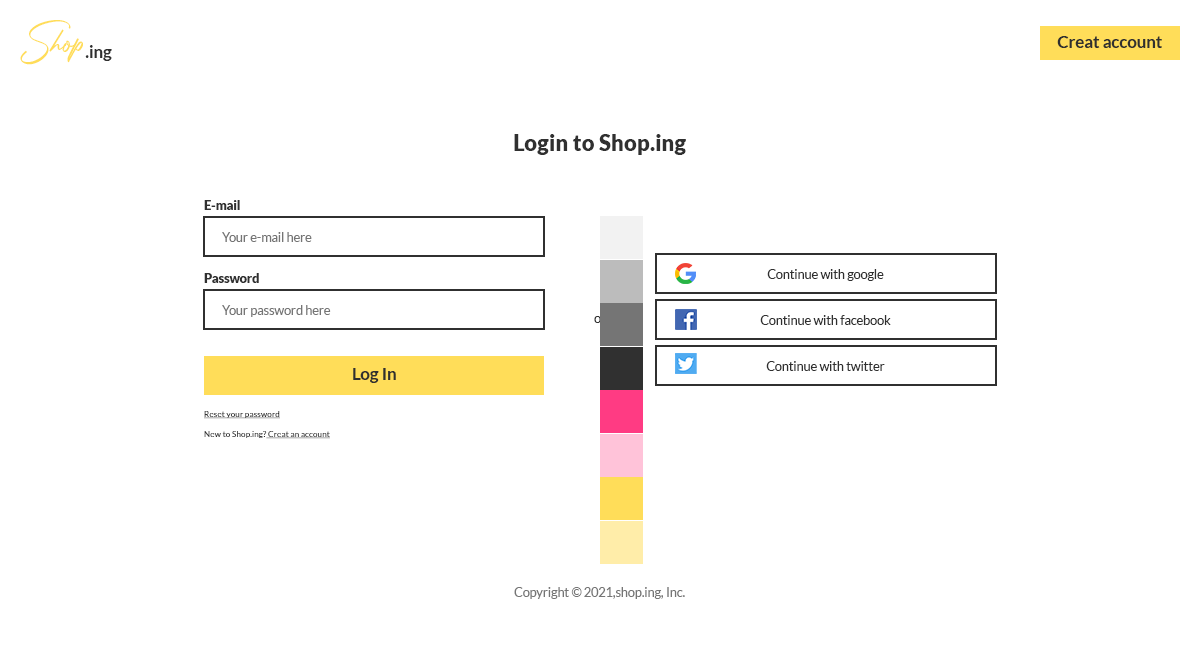
<style>
.page{position:relative;width:1200px;height:672px;background:#ffffff}
.page>*{position:absolute;margin:0}
.t1{font:41.7px "PhotographSignature";color:#ffdd59}
.t2{font:16.7px "Lato-Bold";color:#ffdd59}
.t3{font:16.7px "Lato-Bold";color:#303030}
.t4{font:22.4px "Lato-Black";color:#303030}
.t5{font:12.5px "Lato-Black";color:#303030}
.t6{font:12.5px "Lato-Regular";color:#757575}
.t7{font:12.5px "Lato-Regular";color:#303030}
.t8{font:12.5px "Lato-Regular"}
.t9{font:8.3px "Lato-Regular";color:#303030;text-decoration:underline}
.t10{font:8.3px "Lato-Regular";color:#303030}
</style>
<div class="page">
<p class="t1" style="left:20px;top:20px;width:92px;height:45px">Shop<span class="t2">.ing</span></p>
<p class="t1" style="left:20px;top:20px;width:92px;height:45px">Shop<span class="t3">.ing</span></p>
<p class="t3" style="left:1057px;top:36px;width:105px;height:12px">Creat account</p>
<p class="t4" style="left:514px;top:134px;width:172px;height:21px">Login to Shop.ing</p>
<p class="t5" style="left:204px;top:200px;width:36px;height:10px">E-mail</p>
<p class="t6" style="left:222px;top:232px;width:90px;height:10px">Your e-mail here</p>
<p class="t7" style="left:767px;top:269px;width:117px;height:12px">Continue with google</p>
<p class="t5" style="left:204px;top:273px;width:55px;height:10px">Password</p>
<p class="t6" style="left:222px;top:305px;width:109px;height:12px">Your password here</p>
<p class="t8" style="left:594px;top:316px;width:12px;height:7px">or</p>
<p class="t7" style="left:760px;top:315px;width:131px;height:10px">Continue with facebook</p>
<p class="t7" style="left:766px;top:361px;width:119px;height:10px">Continue with twitter</p>
<p class="t3" style="left:353px;top:368px;width:43px;height:15px">Log In</p>
<p class="t9" style="left:204px;top:411px;width:126px;height:28px">Reset your password<br><br><span class="t10">New to Shop.ing?</span> Creat an account</p>
<p class="t6" style="left:514px;top:587px;width:171px;height:12px">Copyright © 2021,shop.ing, Inc.</p>
</div>
